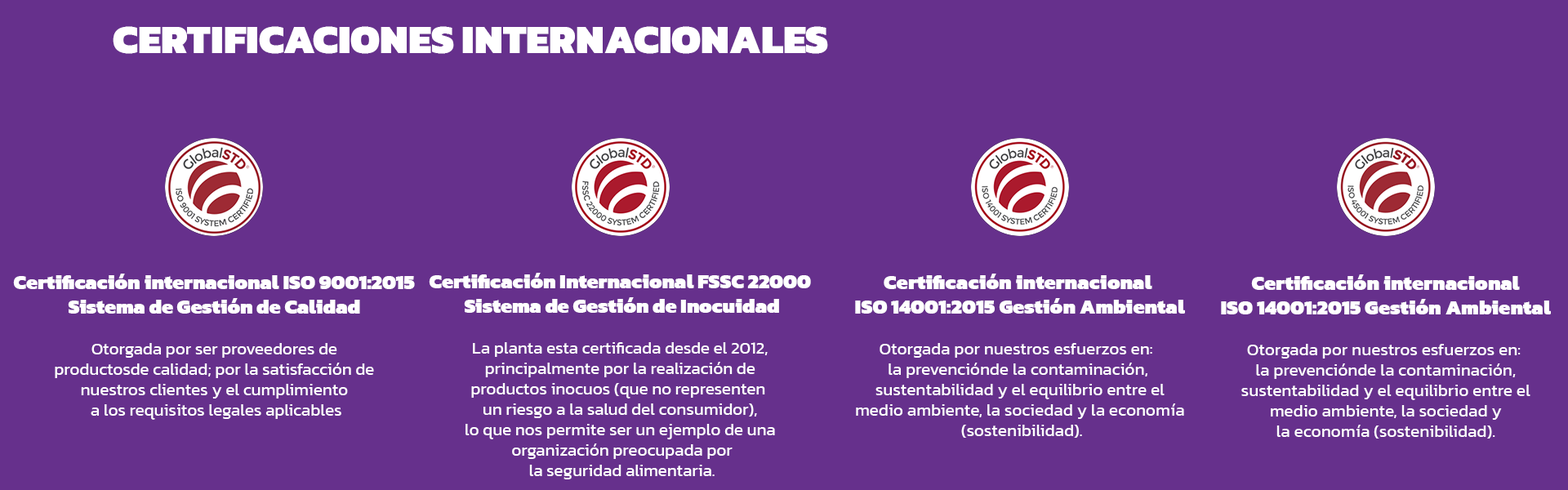
<style>
.page{position:relative;width:1568px;height:490px;background:#66308c}
.page>*{position:absolute;margin:0}
.t1{font:40.8px "Kanit-Black";color:#ffffff}
.t2{font:17px "Kanit-Regular";letter-spacing:-0.005em;color:#ffffff}
.t3{font:20.4px "Kanit-Black";letter-spacing:-0.005em;color:#ffffff}
.t4{font:17px "Kanit-Regular";color:#ffffff}
.t5{font:20.4px "Kanit-Black";color:#ffffff}
</style>
<div class="page">
<p class="t1" style="left:113px;top:26px;width:715px;height:28px">CERTIFICACIONES INTERNACIONALES</p>
<p class="t2" style="left:13px;top:274px;width:402px;height:146px;text-align:center"><span class="t3">Certificación internacional ISO 9001:2015<br>Sistema de Gestión de Calidad<br></span><br>Otorgada por ser proveedores de<br>productosde calidad; por la satisfacción de<br>nuestros clientes y el cumplimiento<br> a los requisitos legales aplicables</p>
<p class="t2" style="left:429px;top:273px;width:382px;height:206px;text-align:center"><span class="t3">Certificación Internacional FSSC 22000<br> Sistema de Gestión de Inocuidad<br></span><br>La planta esta certificada desde el 2012,<br>principalmente por la realización de<br>productos inocuos (que no representen <br>un riesgo a la salud del consumidor),<br>lo que nos permite ser un ejemplo de una<br> organización preocupada por<br> la seguridad alimentaria.</p>
<p class="t4" style="left:855px;top:274px;width:330px;height:164px;text-align:center"><span class="t5">Certificación internacional<br> ISO 14001:2015 Gestión Ambiental<br></span><br>Otorgada por nuestros esfuerzos en: <br>la prevenciónde la contaminación,<br> sustentabilidad y el equilibrio entre el<br> medio ambiente, la sociedad y la economía<br>  (sostenibilidad).</p>
<p class="t4" style="left:1221px;top:274px;width:330px;height:165px;text-align:center"><span class="t5">Certificación internacional<br>ISO 14001:2015 Gestión Ambiental<br></span><br>Otorgada por nuestros esfuerzos en: <br>la prevenciónde la contaminación,<br>sustentabilidad y el equilibrio entre el<br>medio ambiente, la sociedad y<br>la economía (sostenibilidad).</p>
</div>
